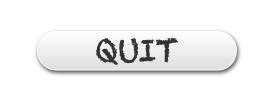
<style>
.page{position:relative;width:272px;height:107px;background:#ffffff}
.page>*{position:absolute;margin:0}
.t1{font:30px "Chalkduster";color:#333333}
</style>
<div class="page">
<p class="t1" style="left:96px;top:37px;width:82px;height:28px">QUIT</p>
</div>
